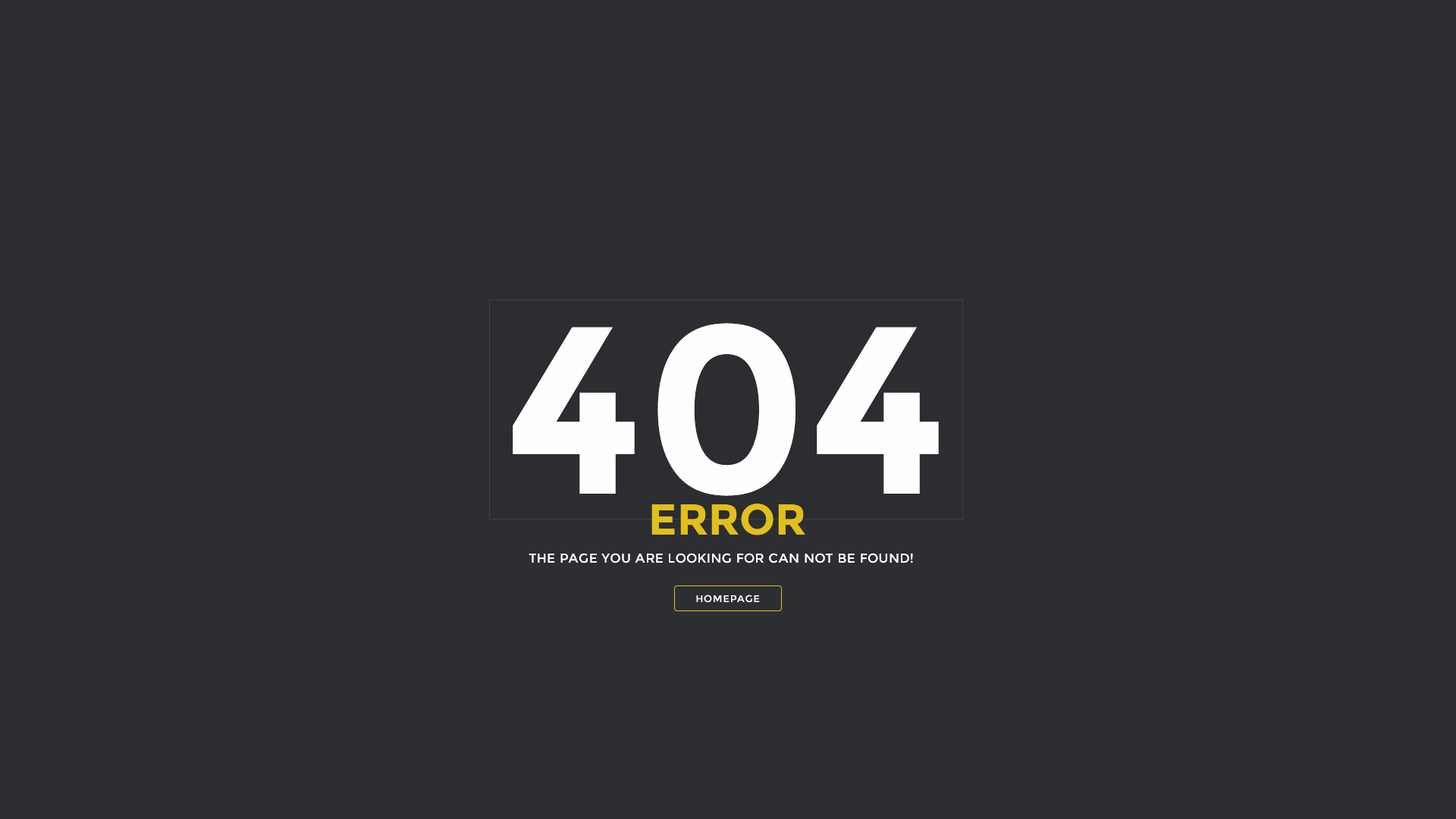
<style>
.page{position:relative;width:1456px;height:819px;background:#2d2e32}
.page>*{position:absolute;margin:0}
.t1{font:238.1px "Montserrat-Bold";color:#fefefe;text-transform:uppercase}
.t2{font:43.2px "Montserrat-Bold";color:#e2bf1d;text-transform:uppercase}
.t3{font:12.9px "Montserrat-Regular";letter-spacing:0.025em;color:#ffffff;text-transform:uppercase}
.t4{font:9.9px "Montserrat-Regular";letter-spacing:0.05em;color:#ffffff;text-transform:uppercase}
</style>
<div class="page">
<p class="t1" style="left:513px;top:323px;width:426px;height:173px">404</p>
<p class="t2" style="left:651px;top:504px;width:154px;height:31px">error</p>
<p class="t3" style="left:529px;top:553px;width:384px;height:10px">The page you are looking for can not be found!</p>
<p class="t4" style="left:696px;top:595px;width:64px;height:8px">homepage</p>
</div>
